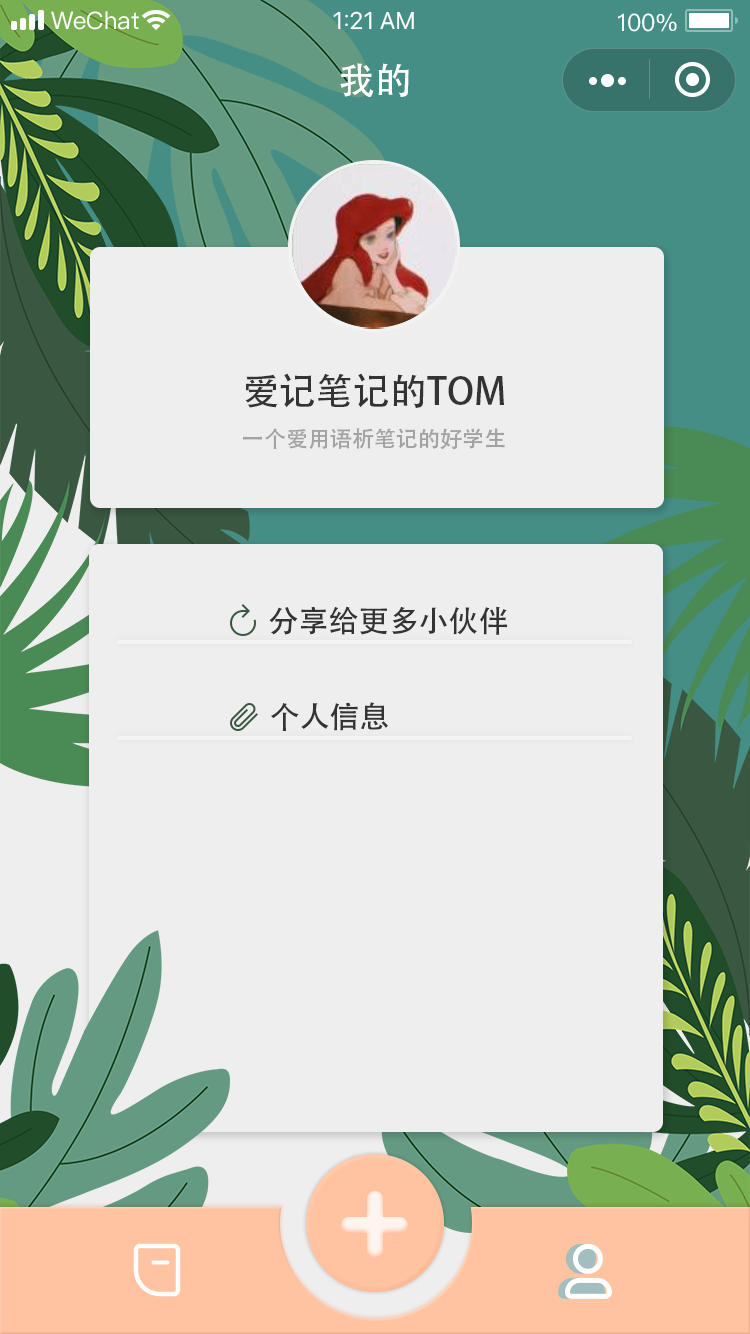
<style>
.page{position:relative;width:750px;height:1334px;background:#efeeee}
.page>*{position:absolute;margin:0}
.t1{font:37px "AdobeHeitiStd-Regular";color:#ffffff}
.t2{font:37px "AdobeHeitiStd-Regular";color:#333333}
.t3{font:22px "AdobeHeitiStd-Regular";color:#a3a3a3}
.t4{font:30px "AdobeHeitiStd-Regular";color:#333333}
</style>
<div class="page">
<p class="t1" style="left:340px;top:63px;width:69px;height:34px">我的</p>
<p class="t2" style="left:245px;top:373px;width:259px;height:35px">爱记笔记的TOM</p>
<p class="t3" style="left:243px;top:428px;width:262px;height:22px">一个爱用语析笔记的好学生</p>
<p class="t4" style="left:269px;top:606px;width:239px;height:29px">分享给更多小伙伴</p>
<p class="t4" style="left:271px;top:702px;width:117px;height:29px">个人信息</p>
</div>
